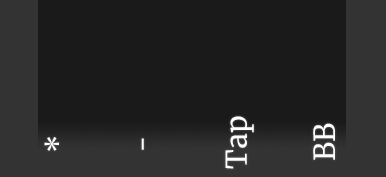
<style>
.page{position:relative;width:386px;height:177px;background:#1a1a1a}
.page>*{position:absolute;margin:0}
.t1{font:28.3px "Merriweather-Regular";color:#ffffff}
</style>
<div class="page">
<p class="t1" style="left:225px;top:116px;width:29px;height:53px;rotate:-90deg">Tap</p>
<p class="t1" style="left:313px;top:123px;width:22px;height:37px;rotate:-90deg">BB</p>
<p class="t1" style="left:44px;top:137px;width:15px;height:14px;rotate:-90deg">*</p>
<p class="t1" style="left:141px;top:138px;width:3px;height:12px;rotate:-90deg">-</p>
</div>
